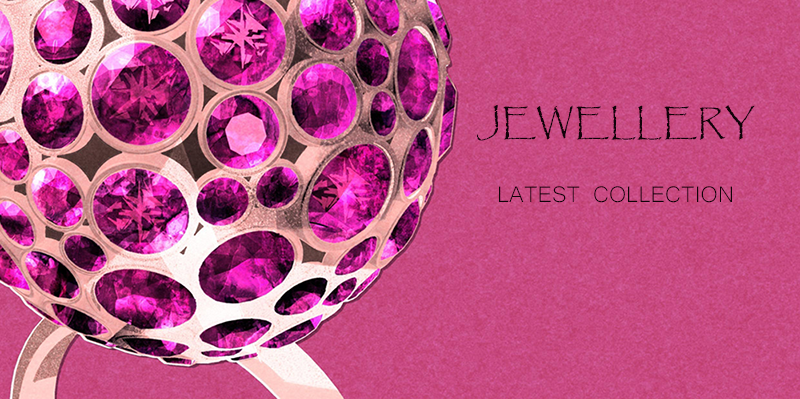
<style>
.page{position:relative;width:800px;height:399px}
.page>*{position:absolute;margin:0}
.t1{font:35.5px "Papyrus-Regular";color:#110309}
.t2{font:29.1px "Microsoft-Yi-Baiti";color:#110309}
</style>
<div class="page">
<p class="t1" style="left:477px;top:104px;width:278px;height:37px">JEWELLERY</p>
<p class="t2" style="left:499px;top:186px;width:233px;height:17px">LATEST COLLECTION</p>
</div>
